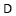
<style>
.page{position:relative;width:16px;height:16px;background:#ffffff}
.page>*{position:absolute;margin:0}
.t1{font:15px "Calibri";color:#000000}
</style>
<div class="page">
<p class="t1" style="left:4px;top:4px;width:8px;height:9px">D</p>
</div>
